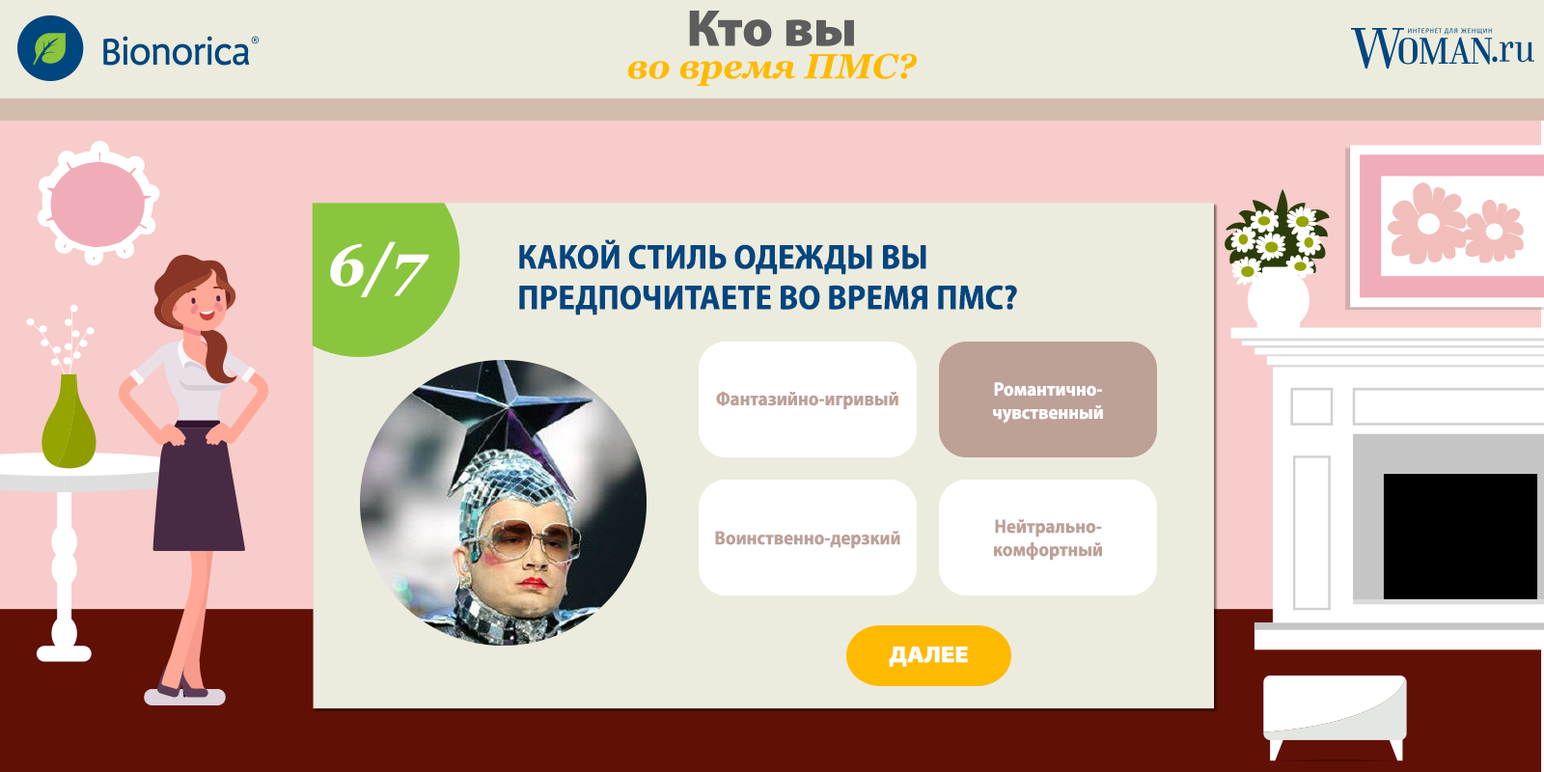
<style>
.page{position:relative;width:1544px;height:772px;background:#ececde}
.page>*{position:absolute;margin:0}
.t1{font:57.9px "Georgia-BoldItalic";color:#ffffff}
.t2{font:34.7px/40.5px "MyriadPro-BoldSemiCn";color:#00467f;text-transform:uppercase}
.t3{font:19.3px "MyriadPro-BoldSemiCn";color:#ffffff}
.t4{font:19.3px "MyriadPro-BoldSemiCn";color:#bda098}
.t5{font:23.2px "MyriadPro-BlackSemiExt";color:#ffffff;text-transform:uppercase}
</style>
<div class="page">
<p class="t1" style="left:330px;top:241px;width:100px;height:56px">6/7</p>
<p class="t2" style="left:519px;top:239px;width:498px;height:77px">Какой стиль одежды вы предпочитаете во время ПМС?</p>
<p class="t3" style="left:993px;top:382px;width:110px;height:42px;text-align:center">Романтично-<br>чувственный</p>
<p class="t4" style="left:716px;top:391px;width:183px;height:18px">Фантазийно-игривый</p>
<p class="t4" style="left:994px;top:519px;width:108px;height:42px;text-align:center">Нейтрально-<br>комфортный</p>
<p class="t4" style="left:715px;top:531px;width:186px;height:18px">Воинственно-дерзкий</p>
<p class="t5" style="left:889px;top:647px;width:79px;height:20px">далее</p>
</div>
